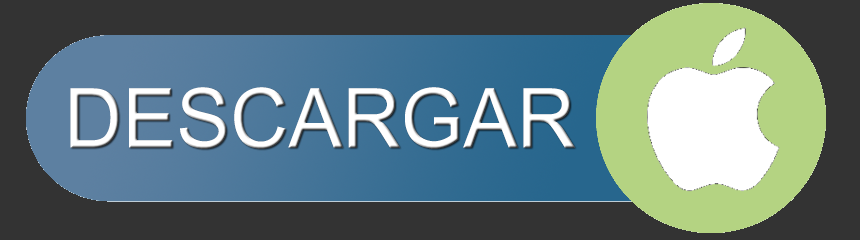
<style>
.page{position:relative;width:860px;height:240px;background:#333333}
.page>*{position:absolute;margin:0}
.t1{font:82.3px "ArialMT";color:#ffffff}
</style>
<div class="page">
<p class="t1" style="left:70px;top:87px;width:505px;height:62px">DESCARGAR</p>
</div>
